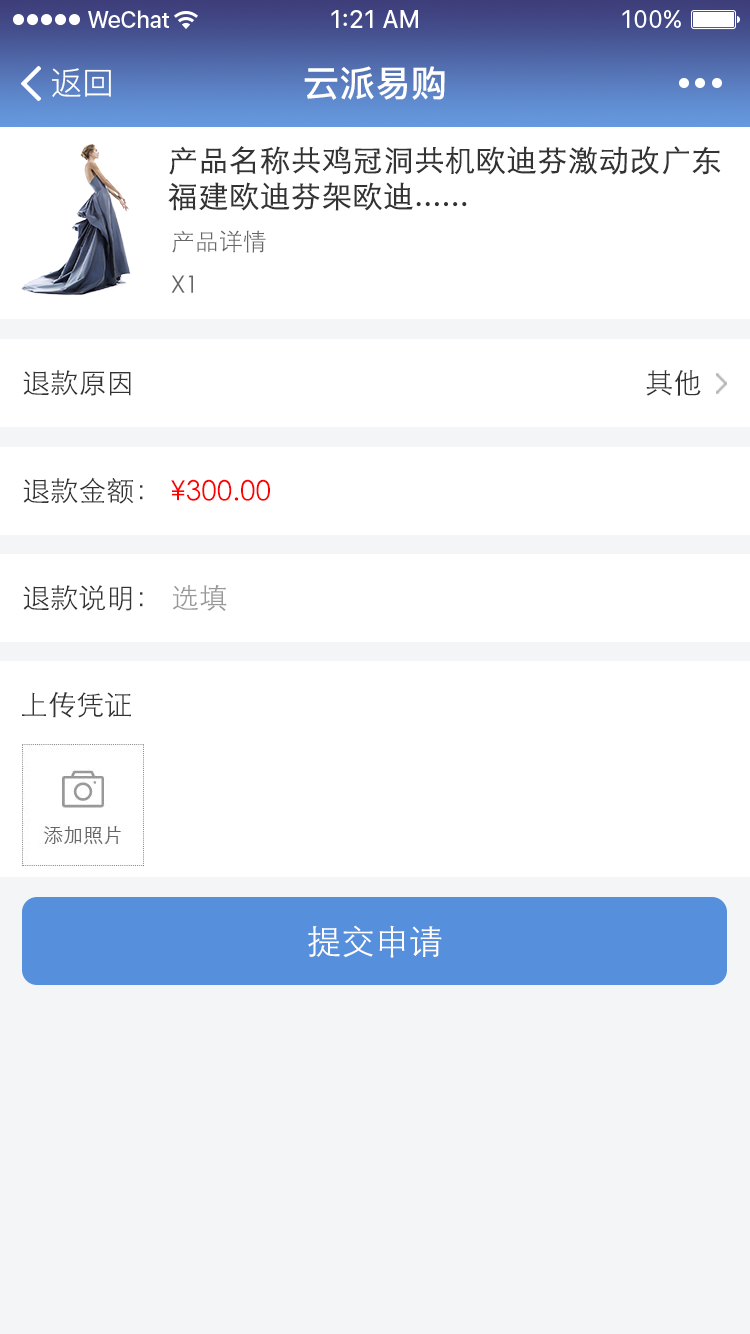
<style>
.page{position:relative;width:750px;height:1334px;background:#ffffff}
.page>*{position:absolute;margin:0}
.t1{font:32px "PingFang-SC-Regular";color:#ffffff}
.t2{font:36px "PingFang-SC-Bold";color:#ffffff}
.t3{font:30px "STXihei";color:#333333;font-weight:bold}
.t4{font:24px "STXihei";color:#666666}
.t5{font:28px "STXihei";color:#333333}
.t6{font:28px "STXihei";color:#fe0000}
.t7{font:28px "STXihei";color:#999999}
.t8{font:34px "STXihei";color:#ffffff}
</style>
<div class="page">
<p class="t1" style="left:52px;top:68px;width:59px;height:29px">返回</p>
<p class="t2" style="left:304px;top:66px;width:141px;height:34px">云派易购</p>
<p class="t3" style="left:168px;top:146px;width:553px;height:65px">产品名称共鸡冠洞共机欧迪芬激动改广东福建欧迪芬架欧迪......</p>
<p class="t4" style="left:172px;top:230px;width:94px;height:23px">产品详情</p>
<p class="t4" style="left:171px;top:275px;width:22px;height:18px">X1</p>
<p class="t5" style="left:23px;top:370px;width:108px;height:26px">退款原因</p>
<p class="t5" style="left:646px;top:370px;width:55px;height:26px">其他</p>
<p class="t5" style="left:23px;top:477px;width:120px;height:27px">退款金额：</p>
<p class="t6" style="left:171px;top:479px;width:99px;height:22px">¥300.00</p>
<p class="t5" style="left:23px;top:585px;width:120px;height:26px">退款说明：</p>
<p class="t7" style="left:172px;top:585px;width:55px;height:26px">选填</p>
<p class="t5" style="left:22px;top:691px;width:109px;height:27px">上传凭证</p>
<p class="t8" style="left:308px;top:925px;width:134px;height:33px">提交申请</p>
</div>
